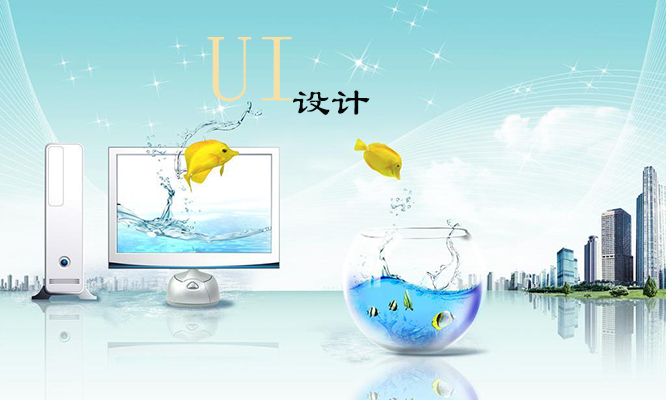
<style>
.page{position:relative;width:666px;height:400px}
.page>*{position:absolute;margin:0}
.t1{font:95.2px "LiSu";color:#f7e0a5}
.t2{font:39px "LiSu";color:#060808}
</style>
<div class="page">
<p class="t1" style="left:207px;top:37px;width:85px;height:65px">UI</p>
<p class="t2" style="left:293px;top:90px;width:77px;height:25px">设计</p>
</div>
